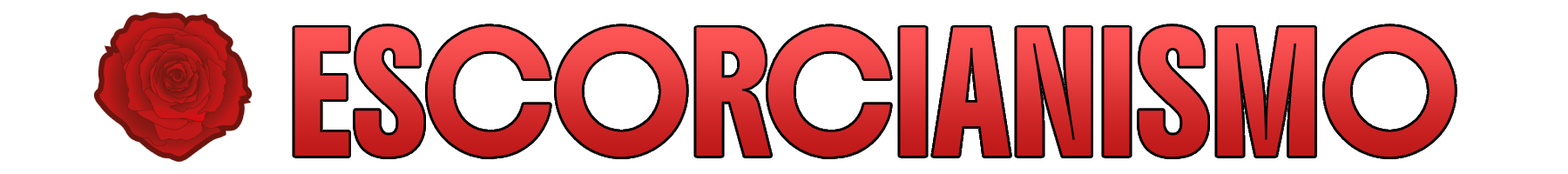
<style>
.page{position:relative;width:1568px;height:174px;background:#ffffff}
.page>*{position:absolute;margin:0}
.t1{font:108px "Boldonse-Regular"}
</style>
<div class="page">
<p class="t1" style="left:294px;top:26px;width:1161px;height:132px">ESCORCIANISMO</p>
</div>
